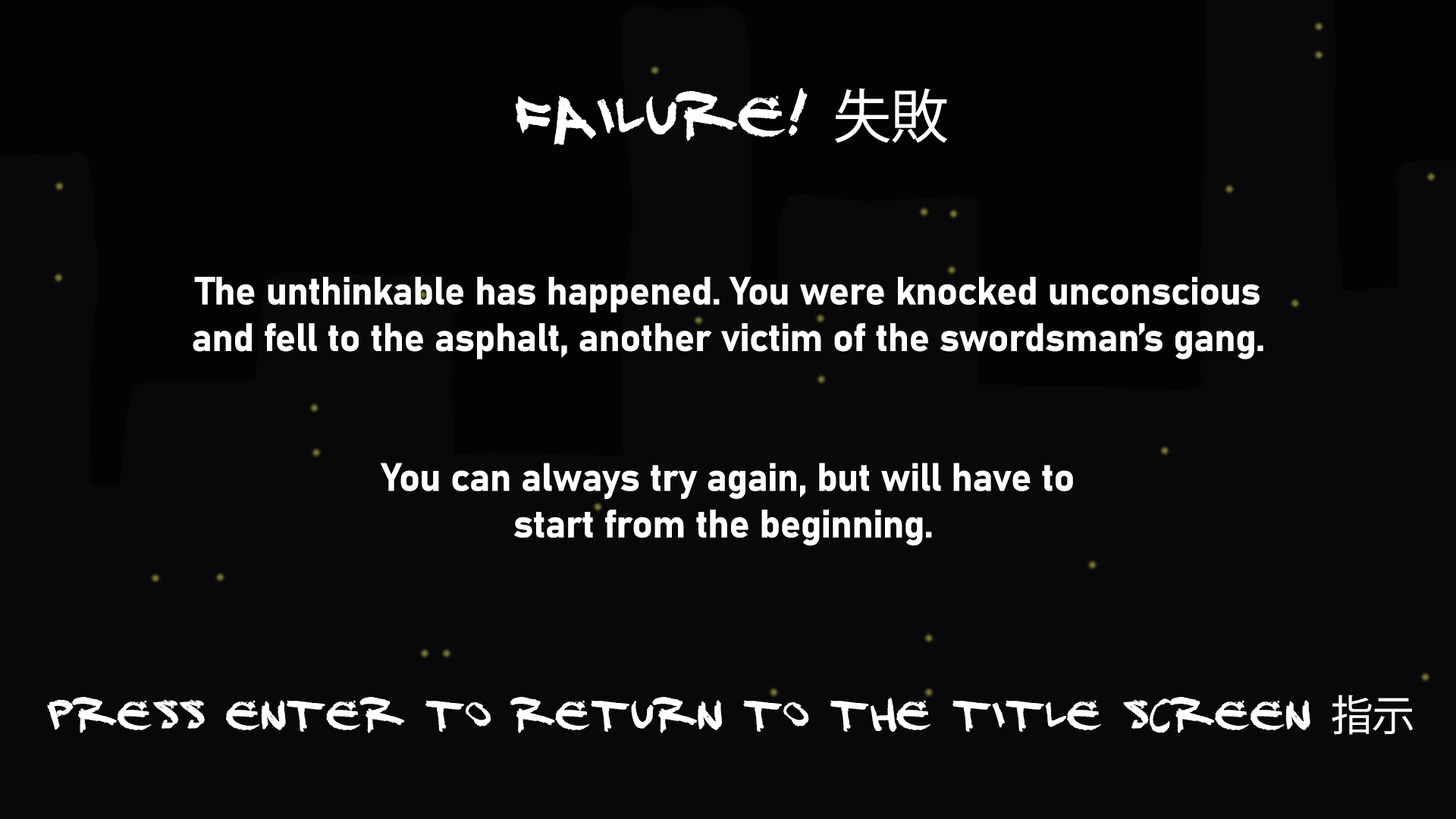
<style>
.page{position:relative;width:1456px;height:819px;background:#08070a}
.page>*{position:absolute;margin:0}
.t1{font:58px "DJ-Gross";letter-spacing:-0.01em;color:#ffffff}
.t2{font:58px "KozGoPr6N-Regular";letter-spacing:-0.01em;color:#ffffff}
.t3{font:38.8px "Bahnschrift-Bold";letter-spacing:-0.01em;color:#ffffff}
.t4{font:41.8px "DJ-Gross";letter-spacing:-0.01em;color:#ffffff}
.t5{font:41.8px "KozGoPr6N-Regular";letter-spacing:-0.01em;color:#ffffff}
</style>
<div class="page">
<p class="t1" style="left:516px;top:88px;width:431px;height:57px">fAILURE! <span class="t2">失敗</span></p>
<p class="t3" style="left:193px;top:277px;width:1070px;height:269px;text-align:center">The unthinkable has happened. You were knocked unconscious<br>and fell to the asphalt, another victim of the swordsman’s gang.<br><br><br>You can always try again, but will have to<br>start from the beginning.</p>
<p class="t4" style="left:47px;top:695px;width:1366px;height:40px">PRESS ENTER TO RETURN TO THE TITLE SCREEN <span class="t5">指示</span></p>
</div>
